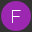
<style>
.page{position:relative;width:32px;height:32px;background:#9c27b0}
.page>*{position:absolute;margin:0}
.t1{font:18px "Roboto-Thin";letter-spacing:-0.05em;color:#ffffff}
</style>
<div class="page">
<p class="t1" style="left:12px;top:10px;width:9px;height:13px">F</p>
</div>
